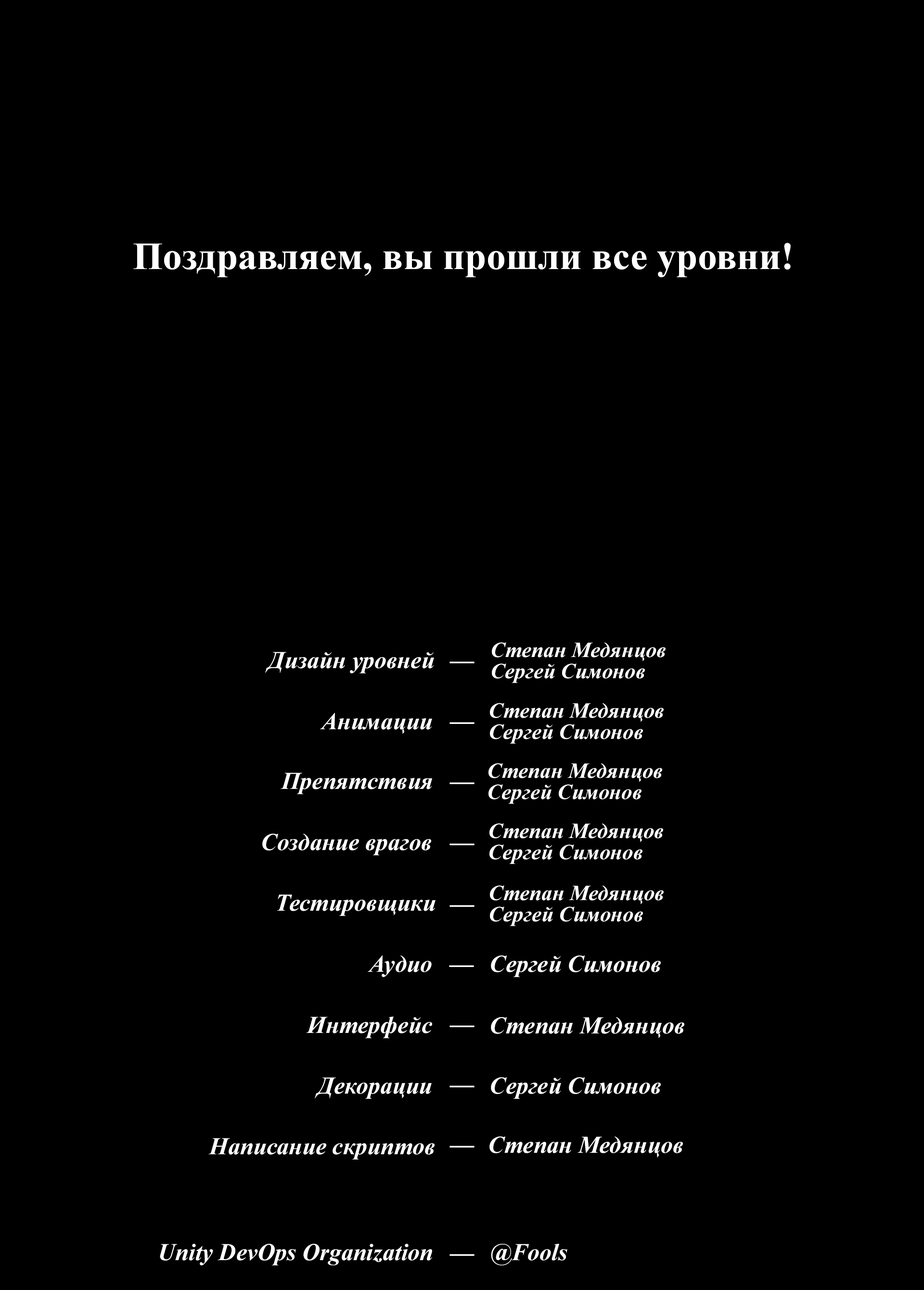
<style>
.page{position:relative;width:924px;height:1290px;background:#000000}
.page>*{position:absolute;margin:0}
.t1{font:24.1px "TimesNewRomanPS-BoldItalicMT";color:#ffffff}
.t2{font:21.7px "TimesNewRomanPS-BoldItalicMT";color:#ffffff}
</style>
<div class="page">
<p class="t1" style="left:265px;top:652px;width:169px;height:21px">Дизайн уровней</p>
<p class="t2" style="left:492px;top:642px;width:174px;height:19px">Степан Медянцов</p>
<p class="t1" style="left:450px;top:661px;width:25px;height:2px">—</p>
<p class="t2" style="left:492px;top:663px;width:153px;height:20px">Сергей Симонов</p>
<p class="t1" style="left:320px;top:713px;width:112px;height:21px">Анимации</p>
<p class="t2" style="left:490px;top:703px;width:174px;height:19px">Степан Медянцов</p>
<p class="t1" style="left:450px;top:722px;width:25px;height:2px">—</p>
<p class="t2" style="left:490px;top:724px;width:153px;height:20px">Сергей Симонов</p>
<p class="t1" style="left:281px;top:773px;width:151px;height:21px">Препятствия</p>
<p class="t2" style="left:489px;top:763px;width:173px;height:19px">Степан Медянцов</p>
<p class="t1" style="left:450px;top:782px;width:25px;height:2px">—</p>
<p class="t2" style="left:489px;top:784px;width:153px;height:20px">Сергей Симонов</p>
<p class="t1" style="left:262px;top:834px;width:169px;height:21px">Создание врагов</p>
<p class="t2" style="left:490px;top:823px;width:173px;height:19px">Степан Медянцов</p>
<p class="t1" style="left:450px;top:843px;width:25px;height:2px">—</p>
<p class="t2" style="left:490px;top:844px;width:153px;height:20px">Сергей Симонов</p>
<p class="t2" style="left:490px;top:885px;width:174px;height:20px">Степан Медянцов</p>
<p class="t1" style="left:277px;top:894px;width:159px;height:22px">Тестировщики</p>
<p class="t1" style="left:450px;top:905px;width:25px;height:2px">—</p>
<p class="t2" style="left:490px;top:906px;width:153px;height:20px">Сергей Симонов</p>
<p class="t1" style="left:368px;top:956px;width:64px;height:21px">Аудио</p>
<p class="t1" style="left:449px;top:965px;width:25px;height:2px">—</p>
<p class="t1" style="left:491px;top:956px;width:170px;height:21px">Сергей Симонов</p>
<p class="t1" style="left:306px;top:1017px;width:126px;height:21px">Интерфейс</p>
<p class="t1" style="left:450px;top:1025px;width:25px;height:2px">—</p>
<p class="t1" style="left:491px;top:1017px;width:194px;height:21px">Степан Медянцов</p>
<p class="t1" style="left:315px;top:1077px;width:117px;height:22px">Декорации</p>
<p class="t1" style="left:450px;top:1086px;width:25px;height:1px">—</p>
<p class="t1" style="left:491px;top:1077px;width:170px;height:22px">Сергей Симонов</p>
<p class="t1" style="left:208px;top:1138px;width:227px;height:22px">Написание скриптов</p>
<p class="t1" style="left:450px;top:1146px;width:25px;height:2px">—</p>
<p class="t1" style="left:490px;top:1137px;width:193px;height:21px">Степан Медянцов</p>
<p class="t1" style="left:160px;top:1244px;width:272px;height:22px">Unity DevOps Organization</p>
<p class="t1" style="left:491px;top:1244px;width:77px;height:22px">@Fools</p>
<p class="t1" style="left:450px;top:1254px;width:25px;height:2px">—</p>
</div>
